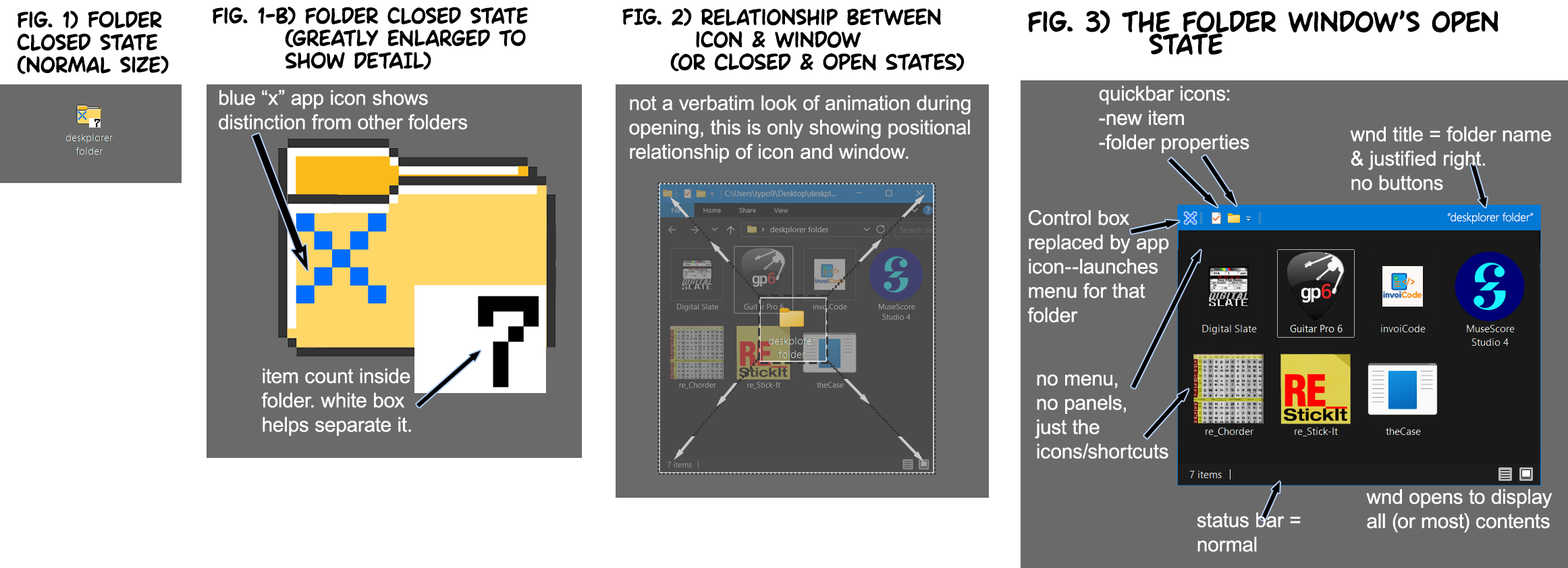
<style>
.page{position:relative;width:1568px;height:568px;background:#ffffff}
.page>*{position:absolute;margin:0}
.t1{font:19.7px/22.5px "Ames";color:#000000;font-weight:bold}
.t2{font:25.3px/22.5px "Ames";color:#000000;font-weight:bold}
.t3{font:20.2px "ArialMT";color:#ffffff}
.t4{font:12.9px "Minecraft";color:#006cff}
.t5{font:10.9px "Minecraft";color:#000000}
.t6{font:143.7px "Minecraft";color:#006cff}
.t7{font:16.6px "Minecraft";color:#006cff}
.t8{font:11.5px "SegoeUI-Light";color:#ffffff}
.t9{font:121px "Minecraft";color:#000000}
</style>
<div class="page">
<p class="t1" style="left:17px;top:11px;width:152px;height:63px">fig. 1) FOlder<br>closed state<br>(normal size)</p>
<p class="t1" style="left:213px;top:7px;width:315px;height:63px">fig. 1-b) folder closed state<br>   (GREATLY ENLARGED TO<br>   SHOW DETAIL)</p>
<p class="t1" style="left:622px;top:8px;width:343px;height:64px">FIg. 2) relationship between <br>   icon &amp; window<br>  (or CLOSED &amp; OPEN STATES)</p>
<p class="t2" style="left:1028px;top:10px;width:470px;height:45px">fig. 3) The folder window’s open <br>     state</p>
<p class="t3" style="left:219px;top:90px;width:249px;height:40px;text-align:justify">blue “x” app icon shows<br>distinction from other folders</p>
<p class="t3" style="left:1099px;top:86px;width:150px;height:67px">quickbar icons:<br>-new item<br>-folder properties</p>
<p class="t3" style="left:629px;top:95px;width:342px;height:68px">not a verbatim look of animation during <br>opening, this is only showing positional <br>relationship of icon and window.</p>
<p class="t4" style="left:78px;top:111px;width:8px;height:8px">x</p>
<p class="t5" style="left:94px;top:119px;width:7px;height:9px">7</p>
<p class="t3" style="left:1350px;top:126px;width:201px;height:64px">wnd title = folder name<br>&amp; justified right.<br>no buttons</p>
<p class="t3" style="left:1027px;top:210px;width:142px;height:113px">Control box<br>replaced by app <br>icon--launches<br>menu for that <br>folder</p>
<p class="t6" style="left:296px;top:213px;width:91px;height:91px">x</p>
<p class="t7" style="left:1185px;top:213px;width:11px;height:10px">x</p>
<p class="t8" style="left:1447px;top:212px;width:87px;height:12px">“deskplorer folder”</p>
<p class="t9" style="left:478px;top:296px;width:61px;height:91px">7</p>
<p class="t3" style="left:261px;top:368px;width:150px;height:68px">item count inside <br>folder. white box<br>helps separate it.</p>
<p class="t3" style="left:1035px;top:374px;width:133px;height:84px">no menu,<br>no panels,<br>just the<br>icons/shortcuts</p>
<p class="t3" style="left:1366px;top:489px;width:186px;height:44px">wnd opens to display<br>all (or most) contents</p>
<p class="t3" style="left:1197px;top:512px;width:104px;height:39px">status bar = <br>normal</p>
</div>
